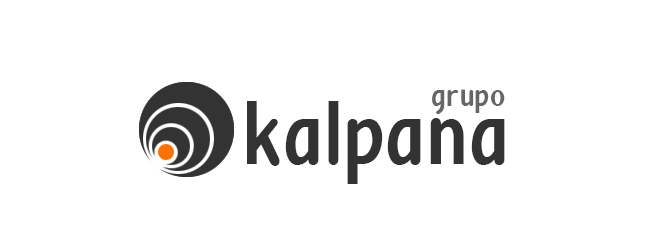
<style>
.page{position:relative;width:650px;height:250px;background:#ffffff}
.page>*{position:absolute;margin:0}
.t1{font:34px "Anna";color:#666666}
.t2{font:94px "Anna";color:#333333}
</style>
<div class="page">
<p class="t1" style="left:432px;top:89px;width:73px;height:25px">grupo</p>
<p class="t2" style="left:247px;top:101px;width:258px;height:83px">kalpana</p>
</div>
